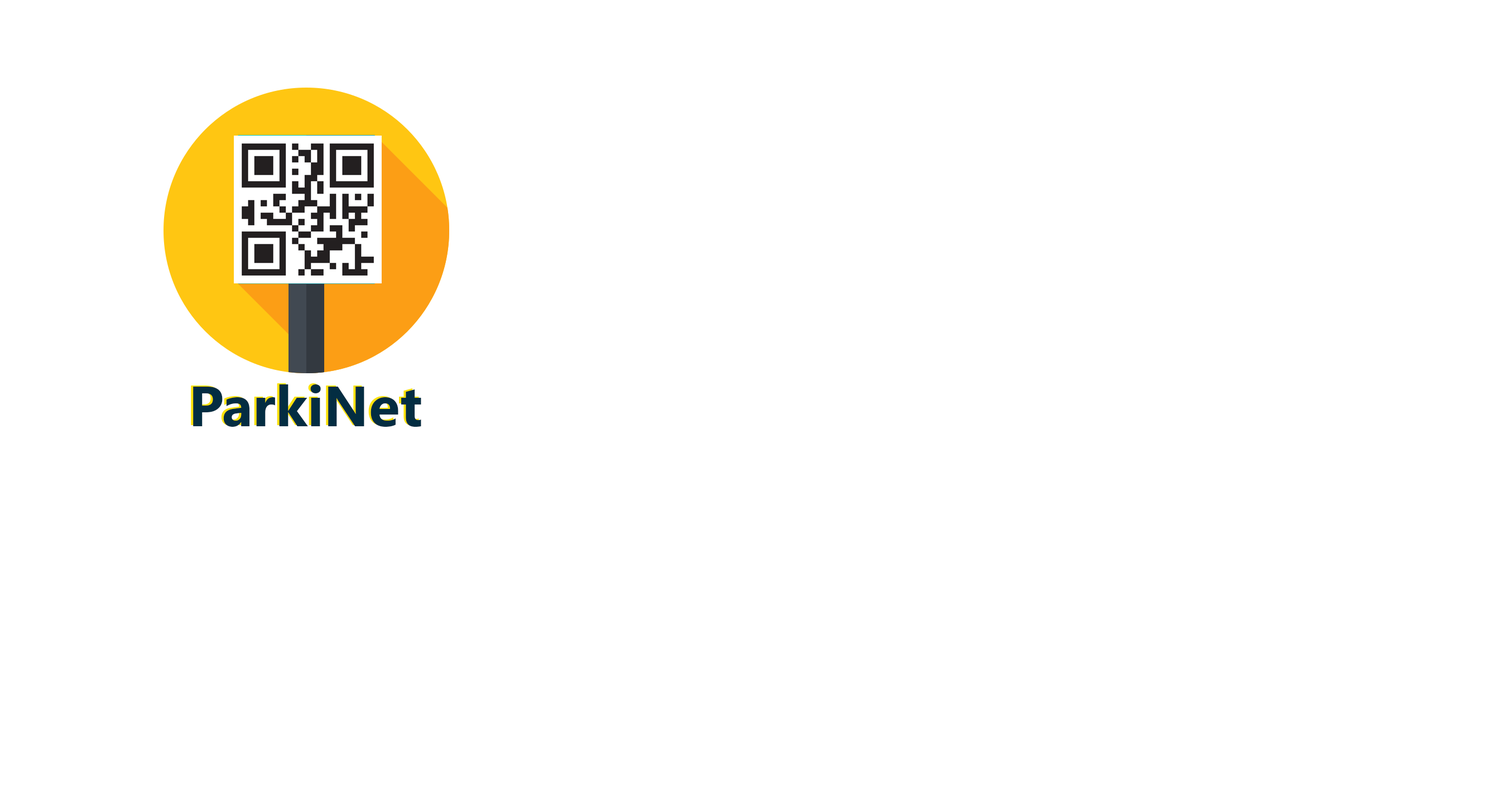
<style>
.page{position:relative;width:1500px;height:795px;background:#ffffff}
.page>*{position:absolute;margin:0}
.t1{font:56.4px "SegoeUI-Bold";color:#032d42}
</style>
<div class="page">
<p class="t1" style="left:191px;top:383px;width:228px;height:43px">ParkiNet</p>
<p class="t1" style="left:193px;top:384px;width:228px;height:43px">ParkiNet</p>
</div>
